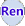
<style>
.page{position:relative;width:25px;height:26px;background:#cfdcf0}
.page>*{position:absolute;margin:0}
.t1{font:12.7px "LaoUI-Bold";color:#3900cf}
</style>
<div class="page">
<p class="t1" style="left:1px;top:6px;width:22px;height:10px">Ren</p>
</div>
